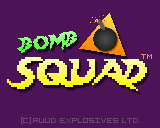
<style>
.page{position:relative;width:160px;height:128px;background:#4c1457}
.page>*{position:absolute;margin:0}
.t1{font:16px "Lady-Radical"}
.t2{font:8px "5x5-Pixel";color:#ff9113}
.t3{font:32px "Lady-Radical"}
.t4{font:8px "5x5-Pixel";color:#6b4873}
.t5{font:8px "MyriadPro-Regular";color:#6b4873}
</style>
<div class="page">
<p class="t1" style="left:17px;top:31px;width:60px;height:22px;rotate:-7deg">BOMB</p>
<p class="t2" style="left:141px;top:54px;width:11px;height:5px">TM</p>
<p class="t3" style="left:7px;top:57px;width:140px;height:34px">SQUAD</p>
<p class="t4" style="left:21px;top:117px;width:119px;height:7px"><span class="t5">[</span>c<span class="t5">]</span> RUUD   EXPLOSIVES   LTD<span class="t5">.</span></p>
</div>
